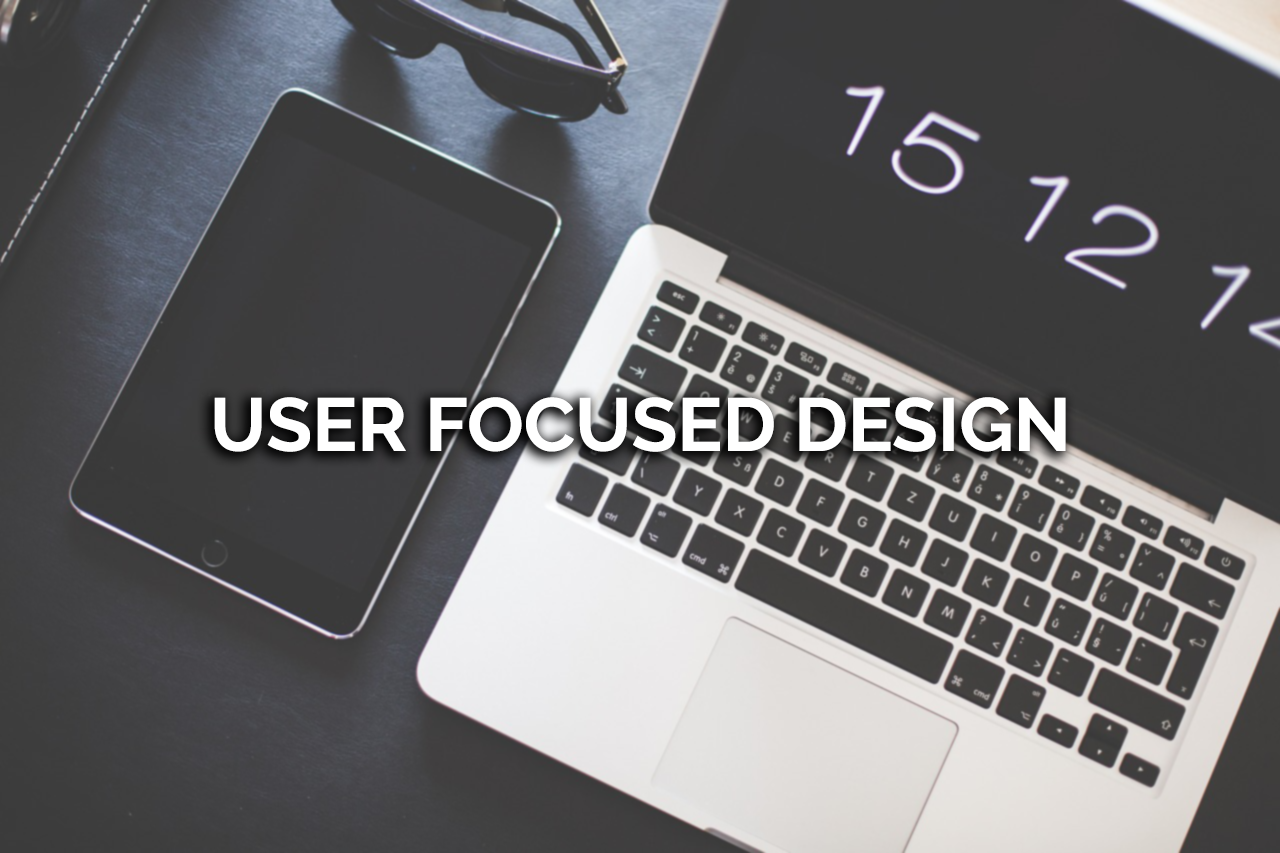
<style>
.page{position:relative;width:1280px;height:853px}
.page>*{position:absolute;margin:0}
.t1{font:75px "Raleway-Bold";color:#ffffff}
</style>
<div class="page">
<p class="t1" style="left:214px;top:397px;width:852px;height:55px">USER FOCUSED DESIGN</p>
</div>
